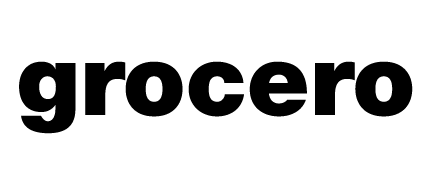
<style>
.page{position:relative;width:432px;height:176px;background:#ffffff}
.page>*{position:absolute;margin:0}
.t1{font:100px "HelveticaNeue-Black";color:#000000}
</style>
<div class="page">
<p class="t1" style="left:19px;top:61px;width:394px;height:73px">grocero</p>
</div>
